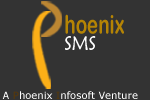
<style>
.page{position:relative;width:150px;height:100px;background:#333333}
.page>*{position:absolute;margin:0}
.t1{font:25.8px "ArialRoundedMTBold";color:#b58404;scale:0.73 1}
.t2{font:19.4px "MaiandraGD-Regular";color:#ffffff;scale:0.91 1}
.t3{font:10.1px "Verdana";color:#ffffff}
.t4{font:10.1px "Verdana";color:#593806}
.t5{font:10.1px "Verdana";color:#563708}
</style>
<div class="page">
<p class="t1" style="left:65px;top:14px;width:59px;height:20px">hoenix</p>
<p class="t2" style="left:65px;top:36px;width:31px;height:14px">SMS</p>
<p class="t3" style="left:2px;top:91px;width:136px;height:8px">A <span class="t4">P</span>hoenix <span class="t5">I</span>nfosoft Venture</p>
</div>
